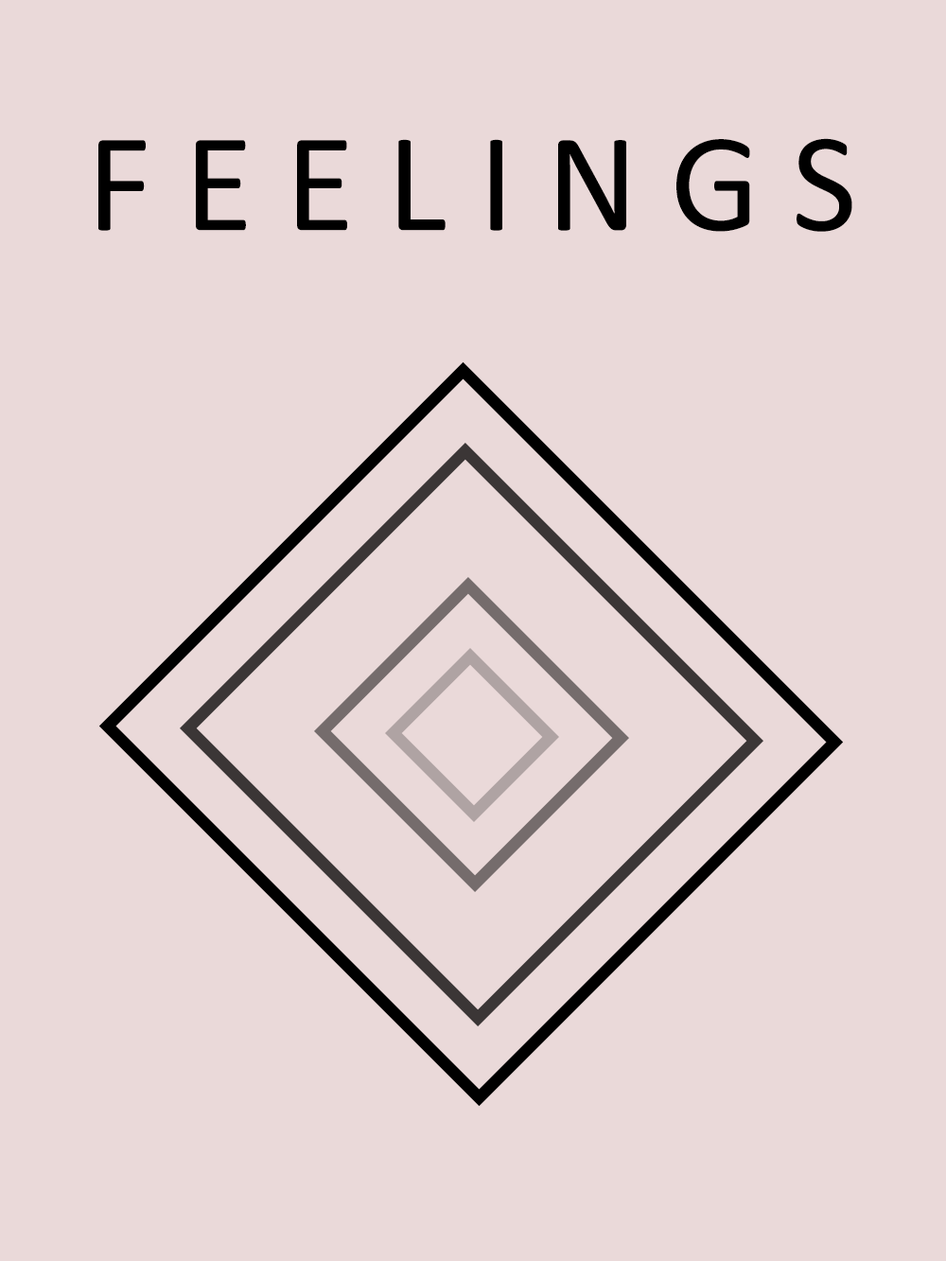
<style>
.page{position:relative;width:946px;height:1261px;background:#ead9d9}
.page>*{position:absolute;margin:0}
.t1{font:141.9px "Calibri";color:#000000}
</style>
<div class="page">
<p class="t1" style="left:98px;top:138px;width:754px;height:94px">F E E L I N G S</p>
</div>
